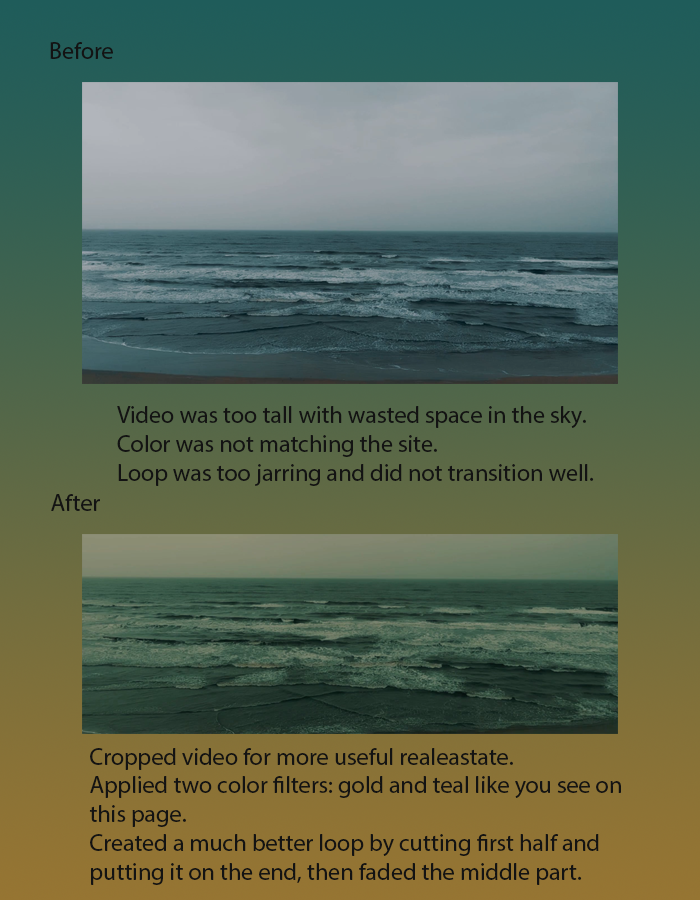
<style>
.page{position:relative;width:700px;height:900px}
.page>*{position:absolute;margin:0}
.t1{font:24px "MyriadPro-Regular";color:#131313}
</style>
<div class="page">
<p class="t1" style="left:50px;top:42px;width:63px;height:17px">Before</p>
<p class="t1" style="left:117px;top:406px;width:477px;height:80px">Video was too tall with wasted space in the sky.<br>Color was not matching the site.<br>Loop was too jarring and did not transition well.</p>
<p class="t1" style="left:51px;top:494px;width:49px;height:17px">After</p>
<p class="t1" style="left:89px;top:748px;width:532px;height:137px">Cropped video for more useful realeastate.<br>Applied two color filters: gold and teal like you see on <br>this page.<br>Created a much better loop by cutting first half and <br>putting it on the end, then faded the middle part.</p>
</div>
